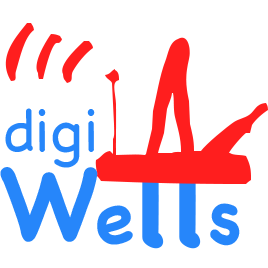
<style>
.page{position:relative;width:268px;height:268px;background:#ffffff}
.page>*{position:absolute;margin:0}
.t1{font:60px "ChalkboardSE-Light";color:#2686fa}
.t2{font:120px "ChalkboardSE-Bold";color:#2686fa}
.t3{font:72px "ChalkboardSE-Bold";color:#2686fa}
.t4{font:100px "ChalkboardSE-Bold";color:#2686fa}
</style>
<div class="page">
<p class="t1" style="left:5px;top:108px;width:90px;height:60px">digi</p>
<p class="t2" style="left:97px;top:155px;width:143px;height:94px"><span class="t3">e</span>ll<span class="t3">s</span></p>
<p class="t4" style="left:0px;top:167px;width:98px;height:75px">W</p>
</div>
